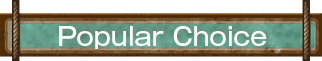
<style>
.page{position:relative;width:322px;height:61px;background:#ffffff}
.page>*{position:absolute;margin:0}
.t1{font:25px "GothicMB101Pro-Medium";color:#fffffa}
</style>
<div class="page">
<p class="t1" style="left:59px;top:26px;width:208px;height:23px">Popular Choice</p>
</div>
